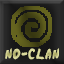
<style>
.page{position:relative;width:64px;height:64px}
.page>*{position:absolute;margin:0}
.t1{font:11.4px "Ninja-Naruto";letter-spacing:0.1em;font-weight:bold;scale:0.93 1}
</style>
<div class="page">
<p class="t1" style="left:5px;top:48px;width:54px;height:12px">NO-CLAN</p>
</div>
